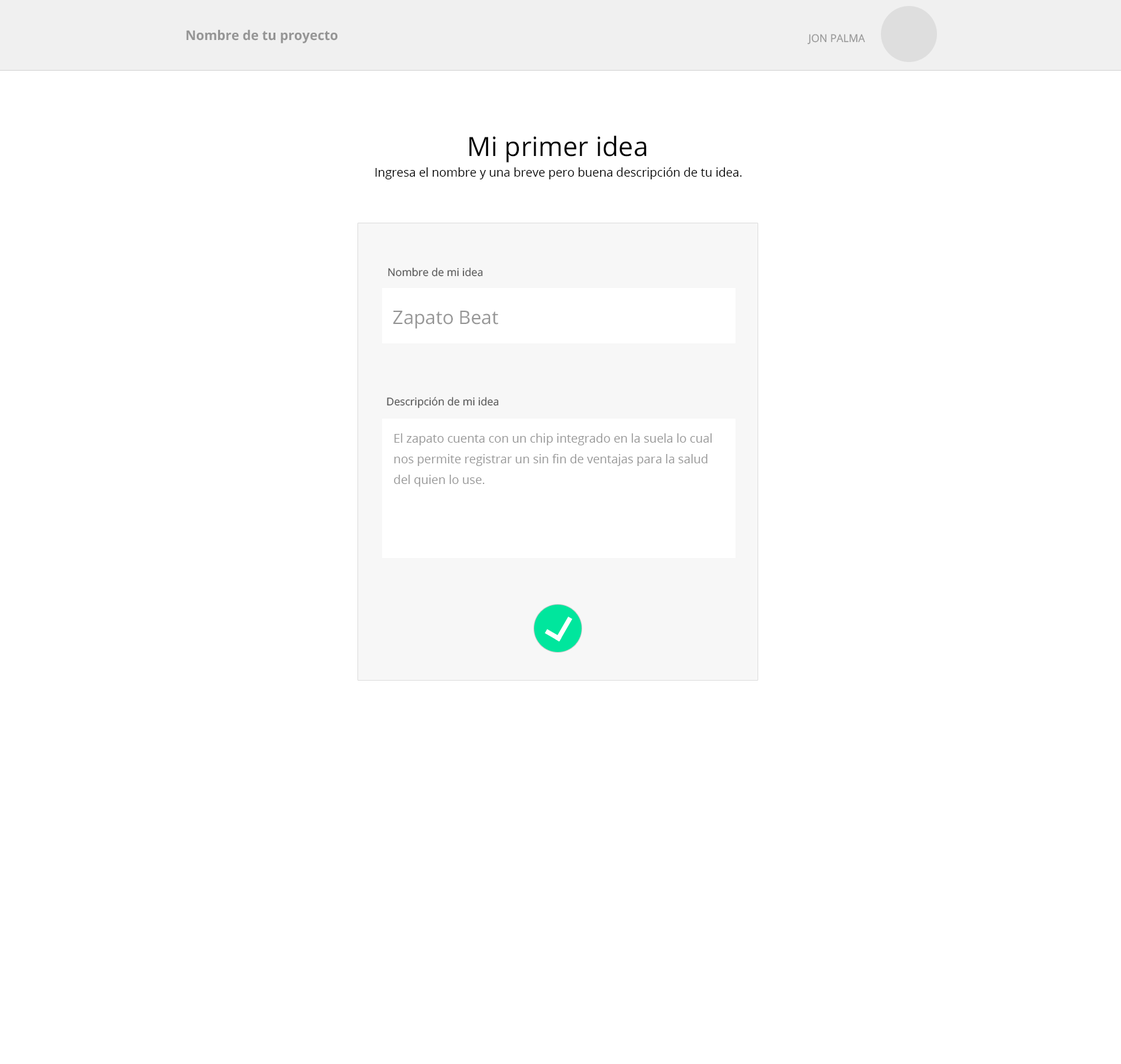
<style>
.page{position:relative;width:1121px;height:1064px;background:#ffffff}
.page>*{position:absolute;margin:0}
.t1{font:13.3px "OpenSans-Bold";color:#959595}
.t2{font:10.7px "OpenSans";color:#959595}
.t3{font:26.7px "OpenSans";color:#000000}
.t4{font:12px "OpenSans";color:#000000}
.t5{font:10.7px "OpenSans";color:#555555}
.t6{font:18.7px "OpenSans";color:#979797}
.t7{font:12px/20.7px "OpenSans";color:#999999}
</style>
<div class="page">
<p class="t1" style="left:186px;top:29px;width:151px;height:14px">Nombre de tu proyecto</p>
<p class="t2" style="left:807px;top:34px;width:58px;height:11px">JON PALMA</p>
<p class="t3" style="left:469px;top:135px;width:177px;height:28px">Mi primer idea</p>
<p class="t4" style="left:375px;top:167px;width:366px;height:12px">Ingresa el nombre y una breve pero buena descripción de tu idea.</p>
<p class="t5" style="left:388px;top:267px;width:95px;height:10px">Nombre de mi idea</p>
<p class="t6" style="left:393px;top:311px;width:105px;height:18px">Zapato Beat</p>
<p class="t5" style="left:387px;top:397px;width:112px;height:11px">Descripción de mi idea</p>
<p class="t7" style="left:393px;top:433px;width:319px;height:54px">El zapato cuenta con un chip integrado en la suela lo cual nos permite registrar un sin fin de ventajas para la salud del quien lo use.</p>
</div>
